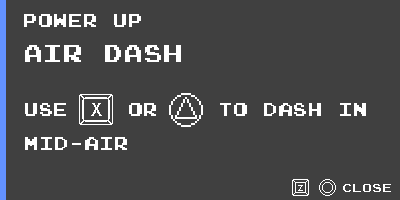
<style>
.page{position:relative;width:400px;height:200px;background:#404040}
.page>*{position:absolute;margin:0}
.t1{font:18px "JoystixMonospace-Regular";color:#ffffff}
.t2{font:24px "JoystixMonospace-Regular";color:#ffffff}
.t3{font:18px "ArialMT";color:#ffffff}
.t4{font:11px "ArialMT";color:#ffffff}
.t5{font:12px "JoystixMonospace-Regular";color:#ffffff}
</style>
<div class="page">
<p class="t1" style="left:24px;top:14px;width:117px;height:13px">Power Up</p>
<p class="t2" style="left:25px;top:45px;width:156px;height:17px">air dash</p>
<p class="t1" style="left:25px;top:103px;width:341px;height:47px">USE    or    to dash in<br>mid-air</p>
<p class="t3" style="left:91px;top:103px;width:11px;height:13px">X</p>
<p class="t4" style="left:298px;top:185px;width:5px;height:6px">z</p>
<p class="t5" style="left:343px;top:184px;width:48px;height:8px">close</p>
</div>
